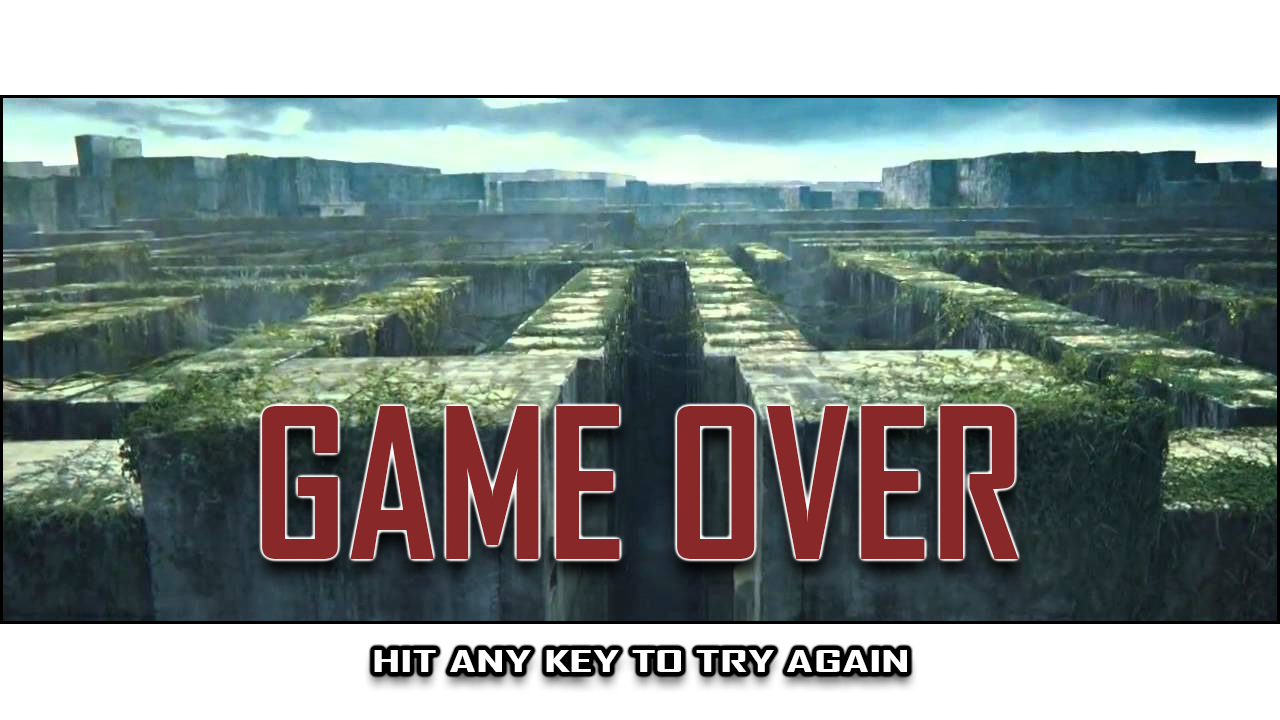
<style>
.page{position:relative;width:1280px;height:720px;background:#ffffff}
.page>*{position:absolute;margin:0}
.t1{font:200px "AgencyFB-Bold";color:#892828}
.t2{font:28.6px "AgencyFB-Bold";color:#ffffff;scale:2.1 1}
</style>
<div class="page">
<p class="t1" style="left:262px;top:406px;width:757px;height:153px">GAME OVER</p>
<p class="t2" style="left:374px;top:650px;width:533px;height:22px">HIT ANY KEY TO TRY AGAIN</p>
</div>
